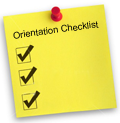
<style>
.page{position:relative;width:120px;height:123px}
.page>*{position:absolute;margin:0}
.t1{font:9.3px "ArialMT";color:#000000}
</style>
<div class="page">
<p class="t1" style="left:13px;top:21px;width:86px;height:18px;rotate:-8deg">Orientation Checklist</p>
</div>
